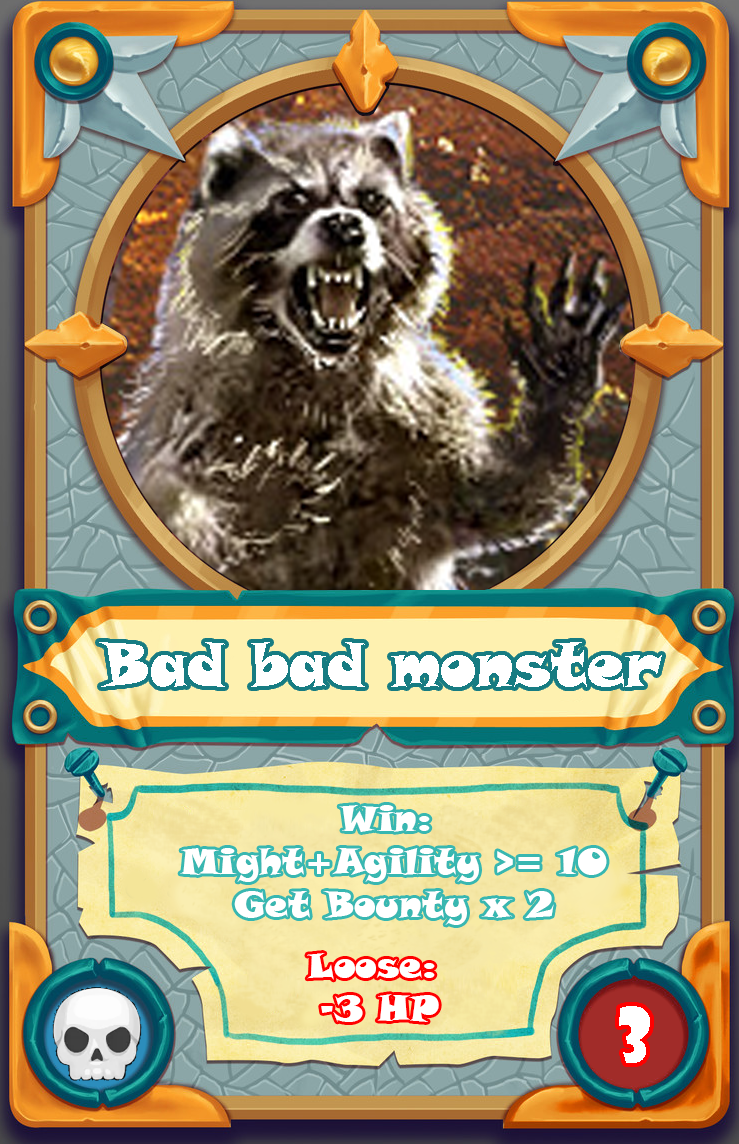
<style>
.page{position:relative;width:739px;height:1144px}
.page>*{position:absolute;margin:0}
.t1{font:60px "SnapITC-Regular";color:#ffffff}
.t2{font:36px "SnapITC-Regular";color:#ffffff}
.t3{font:72px "ShowcardGothic-Reg";color:#ffffff}
</style>
<div class="page">
<p class="t1" style="left:99px;top:642px;width:563px;height:45px">Bad bad monster</p>
<p class="t2" style="left:180px;top:805px;width:427px;height:120px;text-align:center">Win: <br>Might+Agility &gt;= 10<br>Get Bounty x 2</p>
<p class="t2" style="left:307px;top:953px;width:132px;height:69px;text-align:center">Loose: <br>-3 HP</p>
<p class="t3" style="left:619px;top:1006px;width:31px;height:57px">3</p>
</div>
